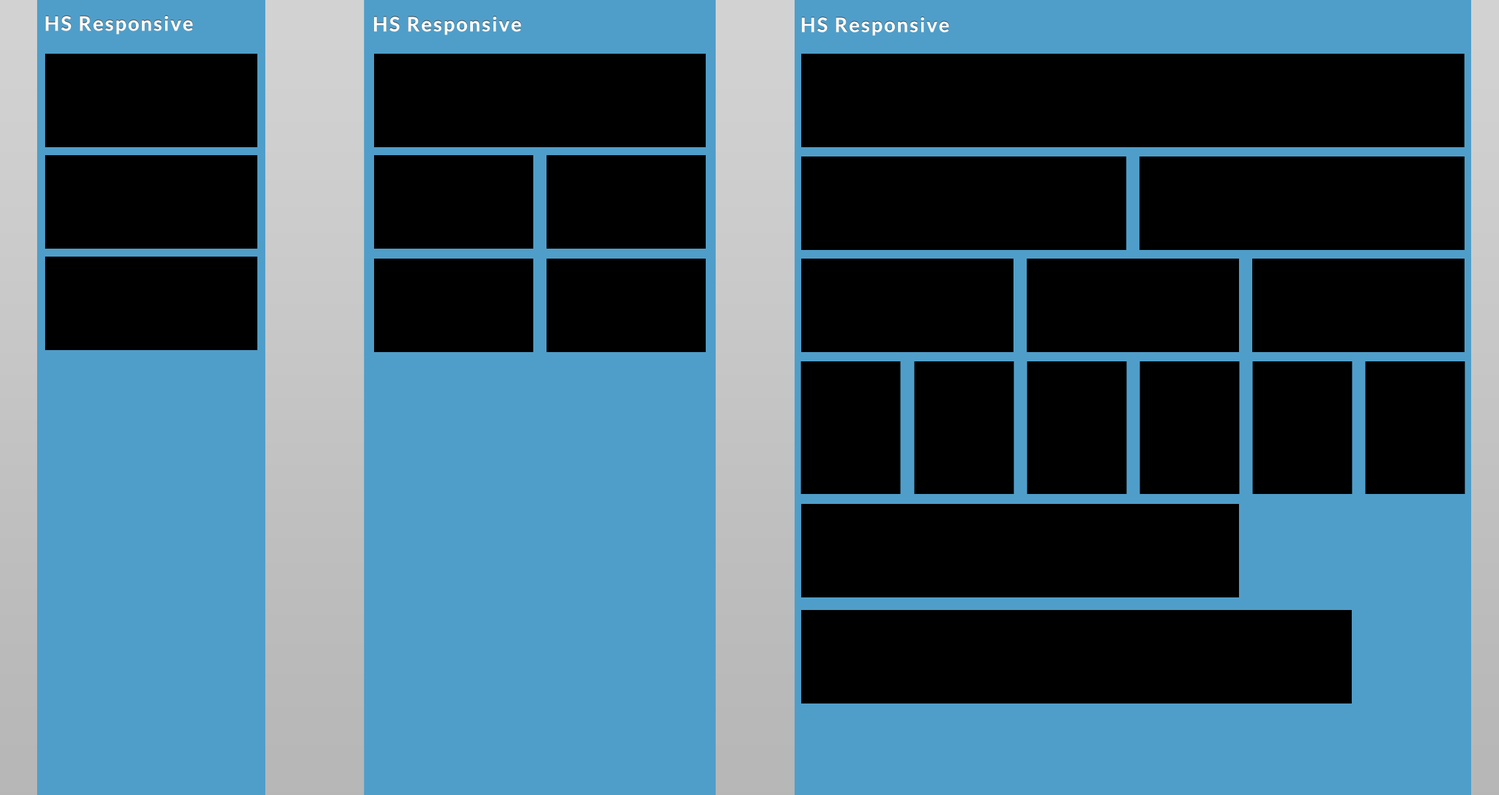
<style>
.page{position:relative;width:1499px;height:795px;background:#000000}
.page>*{position:absolute;margin:0}
.t1{font:19.9px "Lato-Bold";letter-spacing:0.075em;color:#ffffff}
</style>
<div class="page">
<p class="t1" style="left:46px;top:15px;width:147px;height:19px">HS Responsive</p>
<p class="t1" style="left:374px;top:16px;width:147px;height:18px">HS Responsive</p>
<p class="t1" style="left:802px;top:17px;width:147px;height:18px">HS Responsive</p>
</div>
